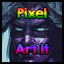
<style>
.page{position:relative;width:64px;height:64px}
.page>*{position:absolute;margin:0}
.t1{font:12px/36px "KGSecondChancesSolid"}
</style>
<div class="page">
<p class="t1" style="left:15px;top:7px;width:34px;height:47px;text-align:center">Pixel<br>Art It</p>
</div>
